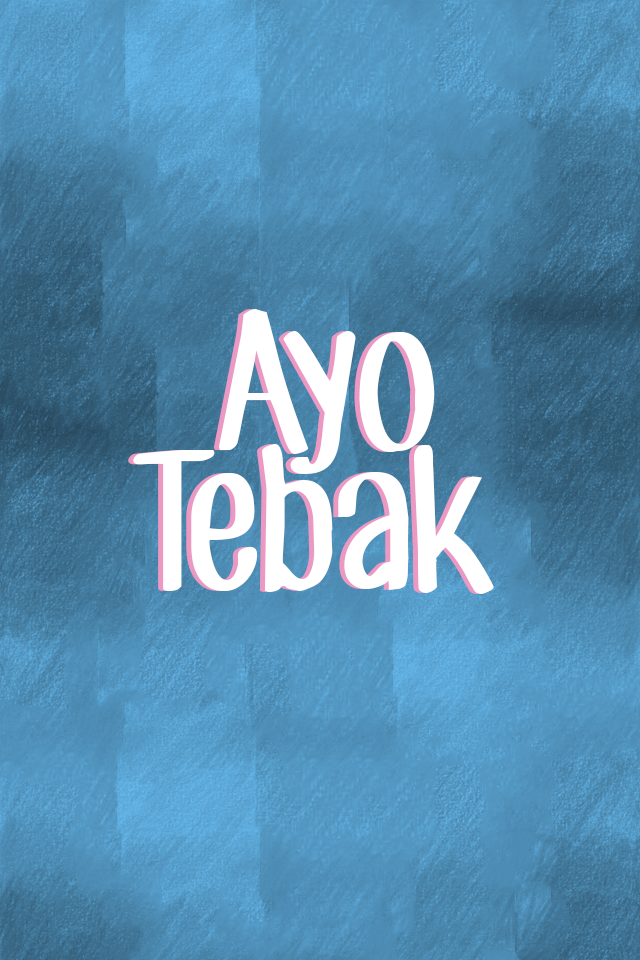
<style>
.page{position:relative;width:640px;height:960px}
.page>*{position:absolute;margin:0}
.t1{font:179.4px "CFJackStory-Regular";color:#ffffff}
.t2{font:179.3px "CFJackStory-Regular";color:#ffffff}
</style>
<div class="page">
<p class="t1" style="left:214px;top:309px;width:216px;height:165px">Ayo</p>
<p class="t1" style="left:219px;top:309px;width:216px;height:165px">Ayo</p>
<p class="t2" style="left:128px;top:444px;width:361px;height:150px">Tebak</p>
<p class="t2" style="left:133px;top:444px;width:361px;height:150px">Tebak</p>
</div>
